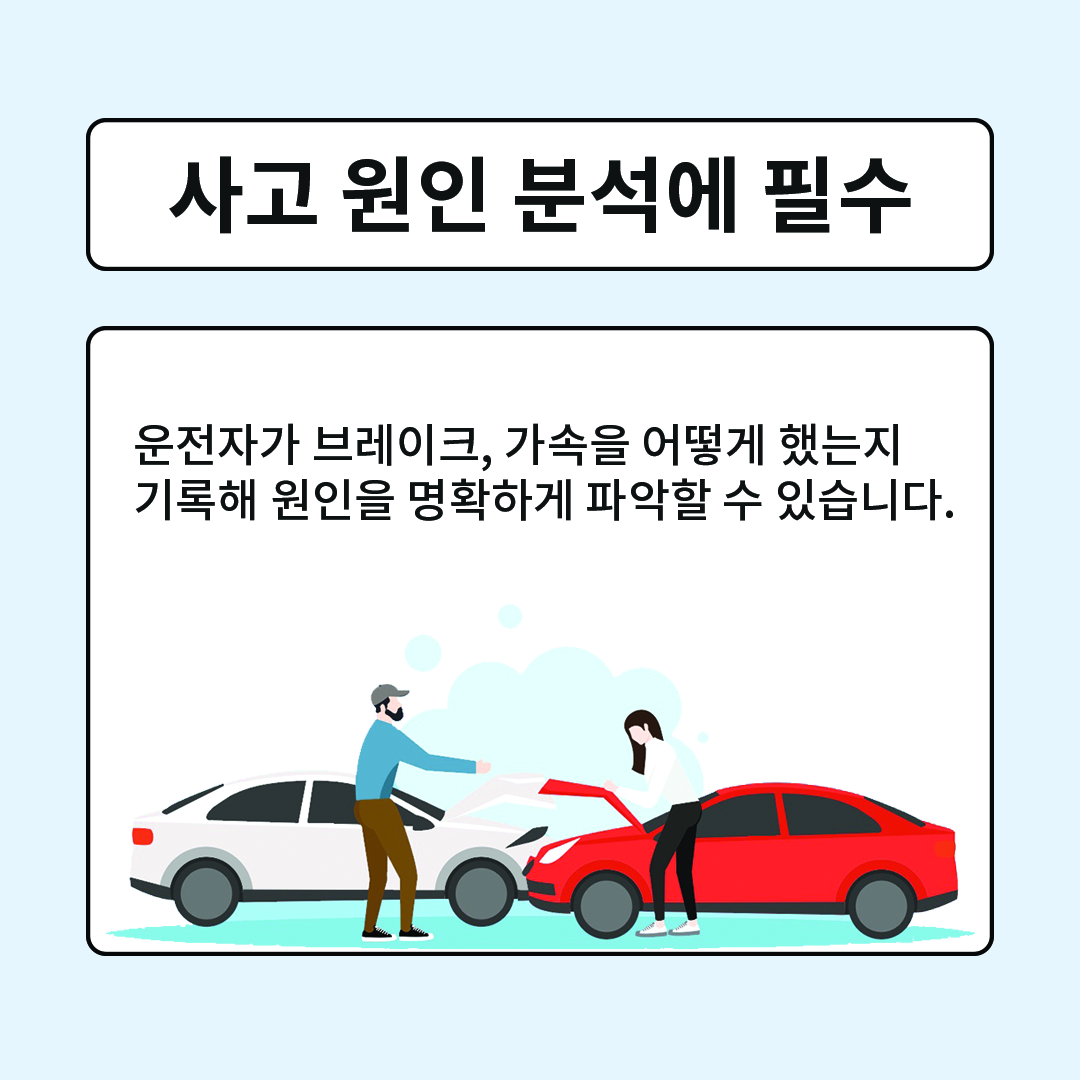
<style>
.page{position:relative;width:1080px;height:1080px;background:#ffffff}
.page>*{position:absolute;margin:0}
.t1{font:83.3px "NotoSansCJKkr-Bold";color:#0e1112}
.t2{font:45.8px "NotoSansCJKkr-Medium";color:#0e1112}
</style>
<div class="page">
<p class="t1" style="left:169px;top:156px;width:742px;height:78px">사고 원인 분석에 필수</p>
<p class="t2" style="left:135px;top:423px;width:818px;height:98px">운전자가 브레이크, 가속을 어떻게 했는지 <br>기록해 원인을 명확하게 파악할 수 있습니다.</p>
</div>
